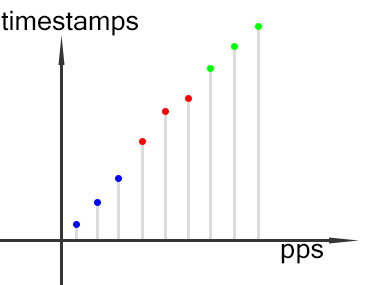
<style>
.page{position:relative;width:367px;height:285px;background:#ffffff}
.page>*{position:absolute;margin:0}
.t1{font:27px "MicrosoftSansSerif";color:#000000}
</style>
<div class="page">
<p class="t1" style="left:1px;top:10px;width:137px;height:26px">timestamps</p>
<p class="t1" style="left:281px;top:243px;width:42px;height:21px">pps</p>
</div>
